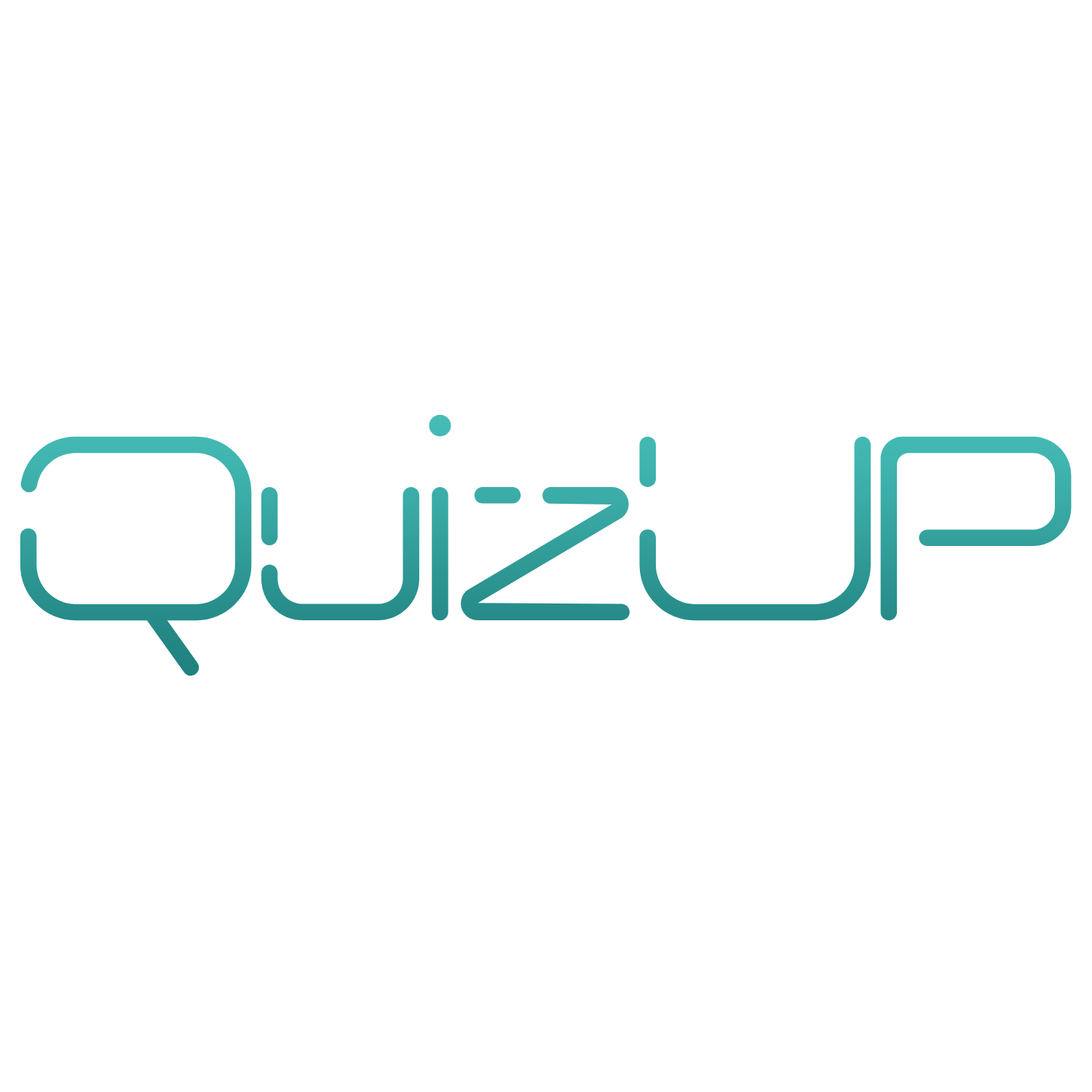
<style>
.page{position:relative;width:1092px;height:1092px;background:#ffffff}
.page>*{position:absolute;margin:0}
.t1{font:247.5px "METHANERSE-Free-Trial";color:#339f9b}
</style>
<div class="page">
<p class="t1" style="left:20px;top:414px;width:1052px;height:263px">QuizUP</p>
</div>
